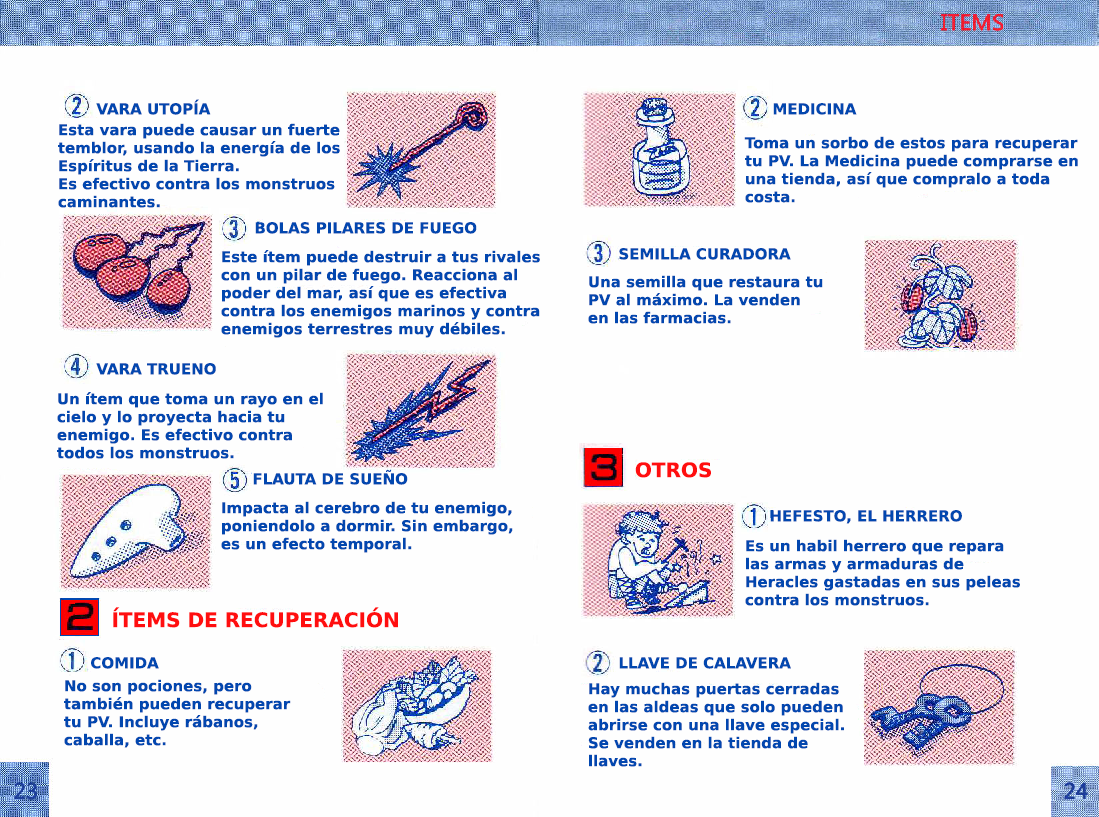
<style>
.page{position:relative;width:1099px;height:817px;background:#fefefe}
.page>*{position:absolute;margin:0}
.t1{font:15px "PrimaSansBT-Bold";color:#0247af}
.t2{font:20px "PrimaSansBT-Bold";color:#ff0e0f}
</style>
<div class="page">
<p class="t1" style="left:96px;top:99px;width:115px;height:16px">VARA UTOPÍA</p>
<p class="t1" style="left:773px;top:103px;width:84px;height:12px">MEDICINA</p>
<p class="t1" style="left:58px;top:123px;width:282px;height:85px">Esta vara puede causar un fuerte<br>temblor, usando la energía de los<br>Espíritus de la Tierra.<br>Es efectivo contra los monstruos<br>caminantes.</p>
<p class="t1" style="left:744px;top:136px;width:334px;height:67px">Toma un sorbo de estos para recuperar<br>tu PV. La Medicina puede comprarse en<br>una tienda, así que compralo a toda <br>costa.</p>
<p class="t1" style="left:255px;top:222px;width:222px;height:12px">BOLAS PILARES DE FUEGO</p>
<p class="t1" style="left:221px;top:250px;width:319px;height:88px">Este ítem puede destruir a tus rivales<br>con un pilar de fuego. Reacciona al<br>poder del mar, así que es efectiva<br>contra los enemigos marinos y contra<br>enemigos terrestres muy débiles.</p>
<p class="t1" style="left:619px;top:248px;width:172px;height:12px">SEMILLA CURADORA</p>
<p class="t1" style="left:588px;top:275px;width:235px;height:49px">Una semilla que restaura tu <br>PV al máximo. La venden <br>en las farmacias.</p>
<p class="t1" style="left:96px;top:363px;width:120px;height:12px">VARA TRUENO</p>
<p class="t1" style="left:57px;top:392px;width:266px;height:67px">Un ítem que toma un rayo en el<br>cielo y lo proyecta hacia tu <br>enemigo. Es efectivo contra <br>todos los monstruos.</p>
<p class="t2" style="left:635px;top:462px;width:76px;height:16px">OTROS</p>
<p class="t1" style="left:253px;top:469px;width:155px;height:16px">FLAUTA DE SUEÑO</p>
<p class="t1" style="left:221px;top:501px;width:292px;height:52px">Impacta al cerebro de tu enemigo,<br>poniendolo a dormir. Sin embargo,<br>es un efecto temporal.</p>
<p class="t1" style="left:770px;top:510px;width:192px;height:14px">HEFESTO, EL HERRERO</p>
<p class="t1" style="left:745px;top:539px;width:275px;height:67px">Es un habil herrero que repara<br>las armas y armaduras de<br>Heracles gastadas en sus peleas<br>contra los monstruos.</p>
<p class="t2" style="left:113px;top:607px;width:285px;height:21px">ÍTEMS DE RECUPERACIÓN</p>
<p class="t1" style="left:91px;top:657px;width:68px;height:12px">COMIDA</p>
<p class="t1" style="left:619px;top:657px;width:172px;height:12px">LLAVE DE CALAVERA</p>
<p class="t1" style="left:64px;top:679px;width:227px;height:69px">No son pociones, pero<br>también pueden recuperar<br>tu PV. Incluye rábanos,<br>caballa, etc.</p>
<p class="t1" style="left:588px;top:682px;width:256px;height:85px">Hay muchas puertas cerradas <br>en las aldeas que solo pueden<br>abrirse con una llave especial. <br>Se venden en la tienda de<br>llaves.</p>
</div>
